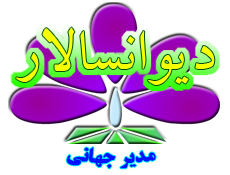
<style>
.page{position:relative;width:230px;height:175px;background:#ffffff}
.page>*{position:absolute;margin:0}
.t1{font:68.3px "BZar";color:#f6ff00}
.t2{font:20px "BTitrBold";color:#0012ff}
</style>
<div class="page">
<p class="t1" style="left:16px;top:27px;width:199px;height:58px">دیوانسالار</p>
<p class="t2" style="left:66px;top:147px;width:90px;height:22px">مدیر جهانی</p>
</div>
